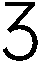
<style>
.page{position:relative;width:40px;height:64px;background:#ffffff}
.page>*{position:absolute;margin:0}
.t1{font:74px "OPPOSans-R";color:#000000}
</style>
<div class="page">
<p class="t1" style="left:3px;top:2px;width:35px;height:59px">3</p>
</div>
